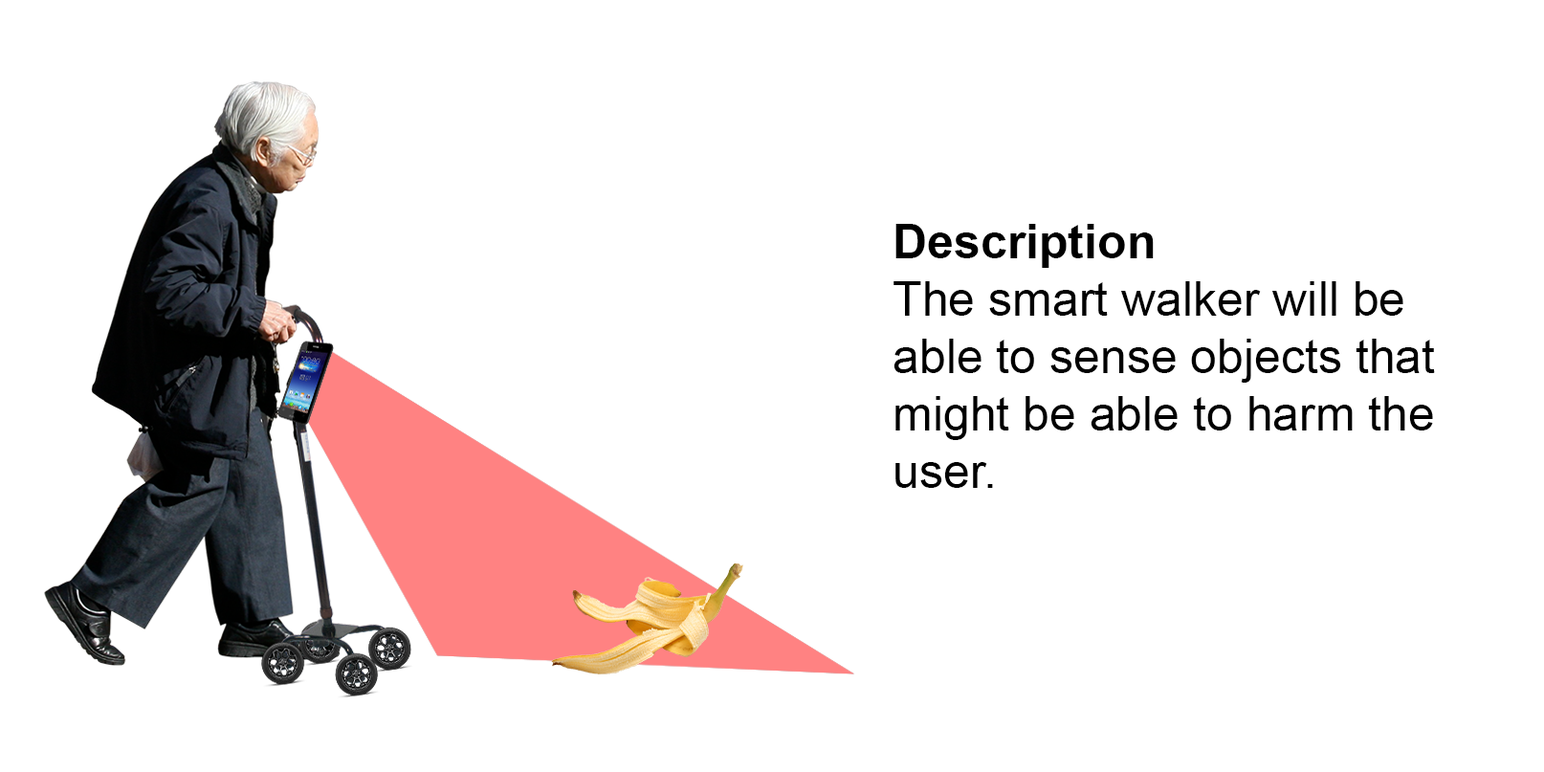
<style>
.page{position:relative;width:1544px;height:772px;background:#ffffff}
.page>*{position:absolute;margin:0}
.t1{font:11.5px "ArialMT";color:#000000}
.t2{font:11.5px "Arial-BoldMT";color:#000000}
</style>
<div class="page">
<p class="t1" style="left:894px;top:224px;width:541px;height:264px"><span class="t2">Description<br></span>The smart walker will be <br>able to sense objects that <br>might be able to harm the <br>user.</p>
</div>
